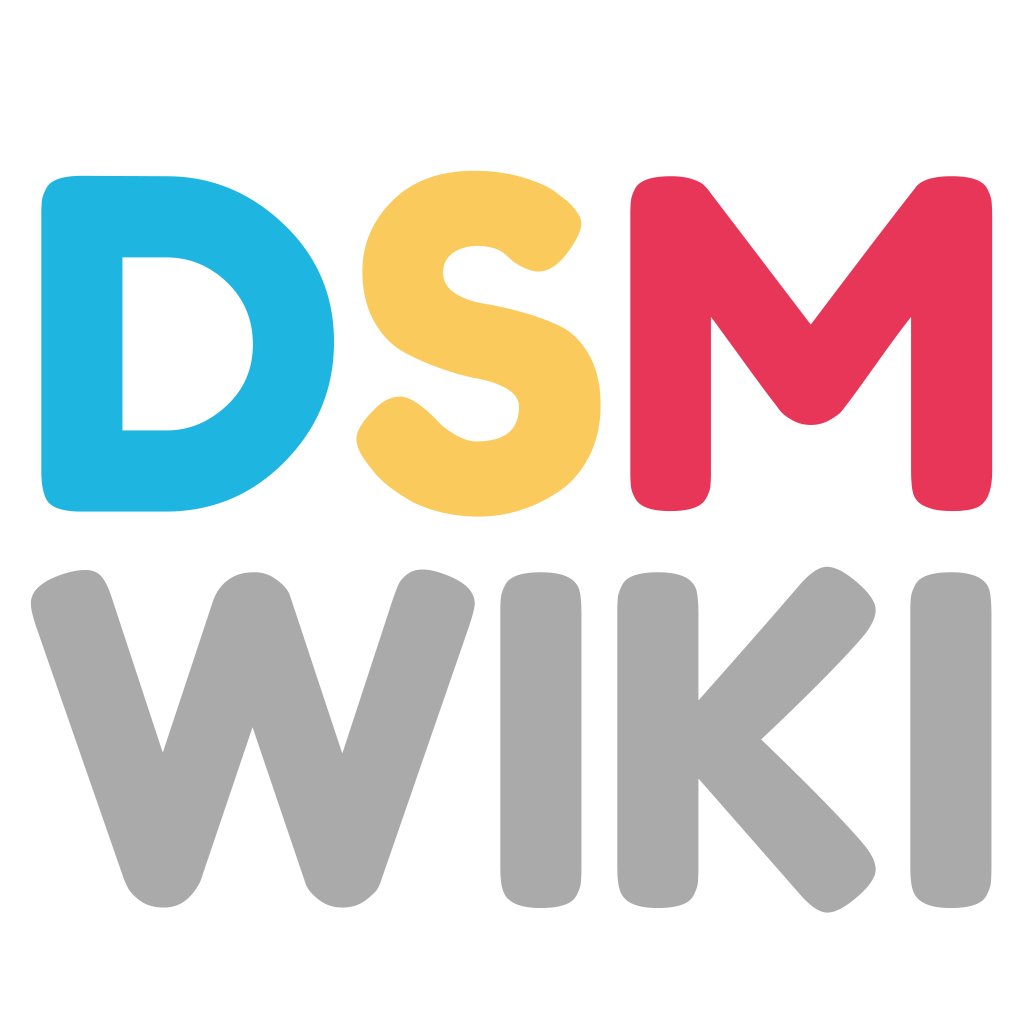
<style>
.page{position:relative;width:1024px;height:1024px;background:#ffffff}
.page>*{position:absolute;margin:0}
.t1{font:458.3px/395.8px "FredokaOne-Regular";color:#aaaaaa}
.t2{font:458.3px/395.8px "FredokaOne-Regular";color:#1eb5e1}
.t3{font:458.3px/395.8px "FredokaOne-Regular";color:#fbca5c}
.t4{font:458.3px/395.8px "FredokaOne-Regular";color:#e83659}
</style>
<div class="page">
<p class="t1" style="left:30px;top:170px;width:963px;height:743px;text-align:center"><span class="t2">D</span><span class="t3">S</span><span class="t4">M<br></span>WIKI</p>
</div>
